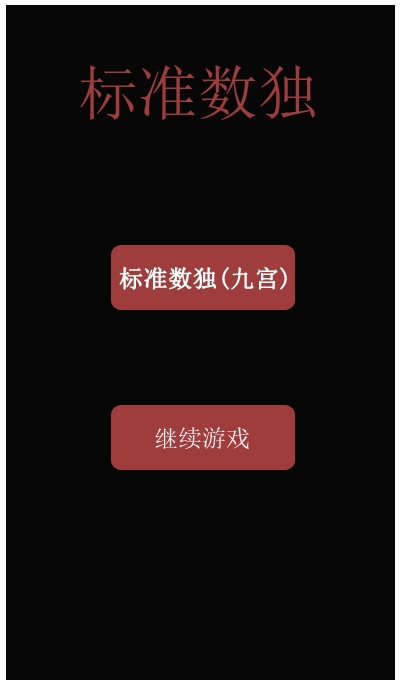
<style>
.page{position:relative;width:400px;height:700px;background:#080707}
.page>*{position:absolute;margin:0}
.t1{font:60px "SimSun";color:#9f3d3d}
.t2{font:24px "SimSun";color:#ffffff;font-weight:bold}
</style>
<div class="page">
<p class="t1" style="left:80px;top:65px;width:235px;height:55px">标准数独</p>
<p class="t2" style="left:119px;top:266px;width:168px;height:24px">标准数独(九宫)</p>
</div>
